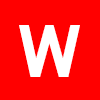
<style>
.page{position:relative;width:100px;height:100px;background:#ff0000}
.page>*{position:absolute;margin:0}
.t1{font:72px "CenturyGothic-Bold";color:#ffffff}
</style>
<div class="page">
<p class="t1" style="left:19px;top:25px;width:61px;height:52px">W</p>
</div>
